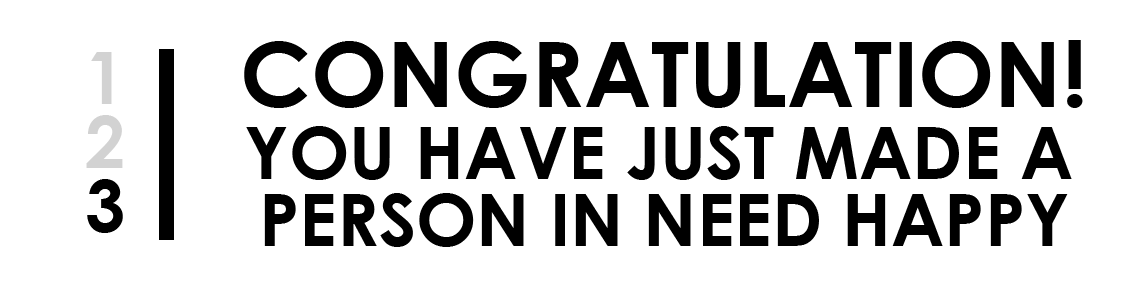
<style>
.page{position:relative;width:1140px;height:291px;background:#ffffff}
.page>*{position:absolute;margin:0}
.t1{font:90.9px "CenturyGothic-Bold";color:#000000}
.t2{font:72px "CenturyGothic-Bold";color:#d2d2d2}
.t3{font:72px "CenturyGothic-Bold";color:#000000}
</style>
<div class="page">
<p class="t1" style="left:244px;top:40px;width:839px;height:68px">CONGRATULATION!</p>
<p class="t2" style="left:91px;top:52px;width:21px;height:52px">1</p>
<p class="t2" style="left:86px;top:115px;width:37px;height:53px">2</p>
<p class="t3" style="left:246px;top:126px;width:826px;height:54px">YOU HAVE JUST MADE A</p>
<p class="t3" style="left:87px;top:179px;width:36px;height:54px">3</p>
<p class="t3" style="left:264px;top:193px;width:804px;height:54px">PERSON IN NEED HAPPY</p>
</div>
